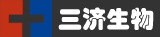
<style>
.page{position:relative;width:160px;height:37px;background:#333333}
.page>*{position:absolute;margin:0}
.t1{font:24px "STHupo";color:#ffffff}
</style>
<div class="page">
<p class="t1" style="left:58px;top:7px;width:96px;height:23px">三济生物</p>
</div>
